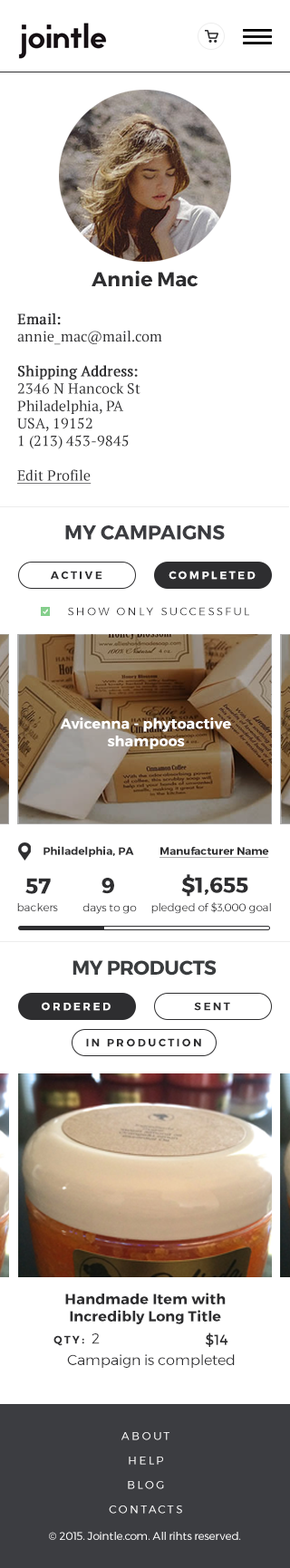
<style>
.page{position:relative;width:290px;height:1568px;background:#ffffff}
.page>*{position:absolute;margin:0}
.t1{font:19.9px "Montserrat-Bold";color:#2e2e30}
.t2{font:14.5px "PTSerif-Regular";color:#2e2e30}
.t3{font:14.5px "PTSerif-Regular";color:#2e2e30;font-weight:bold}
.t4{font:14.5px "PTSerif-Regular";color:#2e2e30;text-decoration:underline}
.t5{font:19.9px "Montserrat-Bold";color:#3c3d41}
.t6{font:10.9px "Montserrat-Bold";letter-spacing:0.2em;color:#2e2e30}
.t7{font:10.9px "Montserrat-Bold";letter-spacing:0.2em;color:#ffffff}
.t8{font:10.9px "Montserrat-Light";letter-spacing:0.2em;color:#2e2e30}
.t9{font:14.5px "Montserrat-Bold";color:#ffffff}
.t10{font:10.9px "Montserrat-Bold";color:#2e2e30;text-decoration:underline}
.t11{font:10.9px "Montserrat-Bold";color:#2e2e30}
.t12{font:21.7px "Montserrat-Bold";color:#2e2e30}
.t13{font:10.9px "Montserrat-Light";color:#2e2e30}
.t14{font:19.9px "Montserrat-Bold";letter-spacing:-0.02em;color:#3a3d3f}
.t15{font:14.5px/14.5px "Montserrat-Bold";color:#2e2e30}
.t16{font:14.5px "Montserrat-Light";color:#2e2e30}
.t17{font:14.5px "Montserrat-Regular";color:#2e2e30}
.t18{font:10.9px/21.7px "Montserrat-Light";letter-spacing:0.2em;color:#ffffff}
.t19{font:10.9px "Montserrat-Light";color:#ffffff}
</style>
<div class="page">
<p class="t1" style="left:91px;top:270px;width:107px;height:17px">Annie Mac</p>
<p class="t2" style="left:17px;top:313px;width:145px;height:171px"><span class="t3">Email:<br></span>annie_mac@mail.com<br><span class="t3"><br>Shipping Address:<br></span>2346 N Hancock St<br>Philadelphia, PA<br>USA, 19152<br>1 (213) 453-9845<br><br><span class="t4">Edit Profile</span></p>
<p class="t5" style="left:65px;top:524px;width:160px;height:16px">MY CAMPAIGNS</p>
<p class="t6" style="left:50px;top:571px;width:52px;height:9px">ACTIVE</p>
<p class="t7" style="left:168px;top:571px;width:87px;height:9px">COMPLETED</p>
<p class="t8" style="left:68px;top:607px;width:181px;height:9px">SHOW ONLY SUCCESSFUL</p>
<p class="t9" style="left:60px;top:717px;width:171px;height:32px;text-align:center">Avicenna - phytoactive<br>shampoos</p>
<p class="t10" style="left:43px;top:846px;width:226px;height:12px"><span class="t11">Philadelphia, PA        </span>Manufacturer Name</p>
<p class="t12" style="left:25px;top:878px;width:26px;height:16px">57</p>
<p class="t12" style="left:101px;top:878px;width:13px;height:16px">9</p>
<p class="t12" style="left:181px;top:874px;width:67px;height:23px">$1,655</p>
<p class="t13" style="left:17px;top:903px;width:41px;height:8px">backers</p>
<p class="t13" style="left:82px;top:903px;width:55px;height:11px">days to go</p>
<p class="t13" style="left:151px;top:902px;width:120px;height:12px">pledged of $3,000 goal</p>
<p class="t14" style="left:72px;top:960px;width:144px;height:16px">MY PRODUCTS</p>
<p class="t7" style="left:42px;top:1002px;width:69px;height:9px">ORDERED</p>
<p class="t6" style="left:194px;top:1002px;width:36px;height:9px">SENT</p>
<p class="t6" style="left:86px;top:1038px;width:115px;height:9px">IN PRODUCTION</p>
<p class="t15" style="left:65px;top:1293px;width:161px;height:31px;text-align:center">Handmade Item with<br>Incredibly Long Title</p>
<p class="t6" style="left:53px;top:1333px;width:47px;height:13px">QTY: <span class="t16">2</span></p>
<p class="t17" style="left:205px;top:1332px;width:23px;height:15px">$14</p>
<p class="t16" style="left:67px;top:1354px;width:168px;height:14px">Campaign is completed</p>
<p class="t18" style="left:109px;top:1432px;width:73px;height:82px;text-align:center">ABOUT<br>HELP<br>BLOG<br>CONTACTS</p>
<p class="t19" style="left:49px;top:1532px;width:192px;height:8px">© 2015. Jointle.com. All rihts reserved.</p>
</div>
